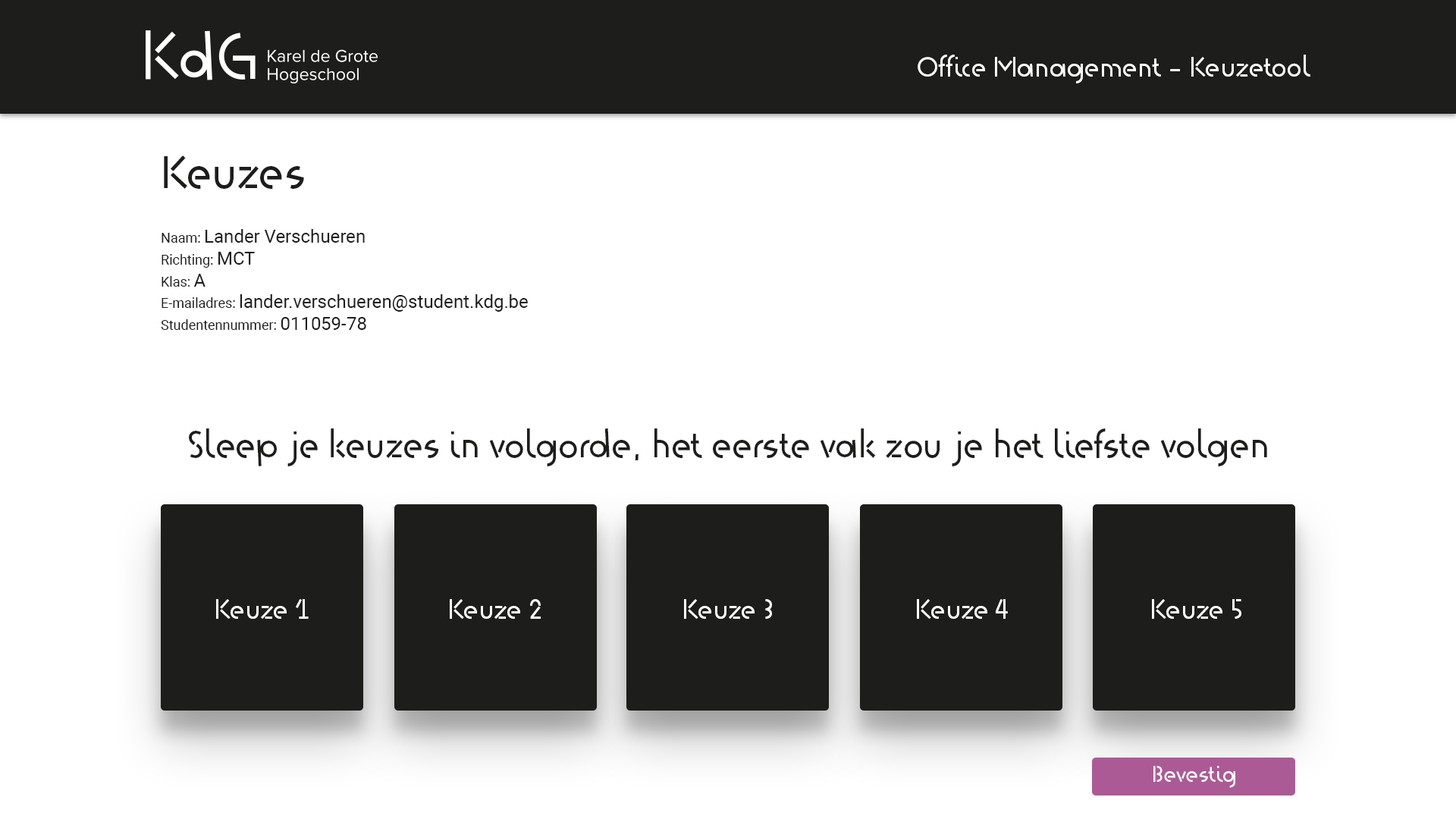
<style>
.page{position:relative;width:1456px;height:819px;background:#ffffff}
.page>*{position:absolute;margin:0}
.t1{font:27.3px "KdG-Regular";color:#fefefe}
.t2{font:18.2px "Roboto-Regular";color:#1d1d1b}
.t3{font:45.5px "KdG-Regular";color:#1d1d1b}
.t4{font:13.6px "Roboto-Regular";color:#1d1d1b}
.t5{font:36.4px "KdG-Regular";color:#1d1d1b}
.t6{font:22.7px "KdG-Regular";color:#fefefe}
</style>
<div class="page">
<p class="t1" style="left:918px;top:55px;width:392px;height:28px">Office Management - Keuzetool</p>
<p class="t2" style="left:161px;top:155px;width:367px;height:175px"><span class="t3">Keuzes<br><br></span><span class="t4">Naam: </span>Lander Verschueren<br><span class="t4">Richting: </span>MCT<br><span class="t4">Klas: </span>A<br><span class="t4">E-mailadres: </span>lander.verschueren@student.kdg.be<br><span class="t4">Studentennummer: </span>011059-78</p>
<p class="t5" style="left:189px;top:428px;width:1078px;height:38px">Sleep je keuzes in volgorde, het eerste vak zou je het liefste volgen</p>
<p class="t1" style="left:216px;top:599px;width:93px;height:20px">Keuze 1</p>
<p class="t1" style="left:450px;top:599px;width:91px;height:20px">Keuze 2</p>
<p class="t1" style="left:684px;top:599px;width:88px;height:20px">Keuze 3</p>
<p class="t1" style="left:917px;top:599px;width:91px;height:20px">Keuze 4</p>
<p class="t1" style="left:1152px;top:599px;width:89px;height:20px">Keuze 5</p>
<p class="t6" style="left:1153px;top:766px;width:82px;height:22px">Bevestig</p>
</div>
